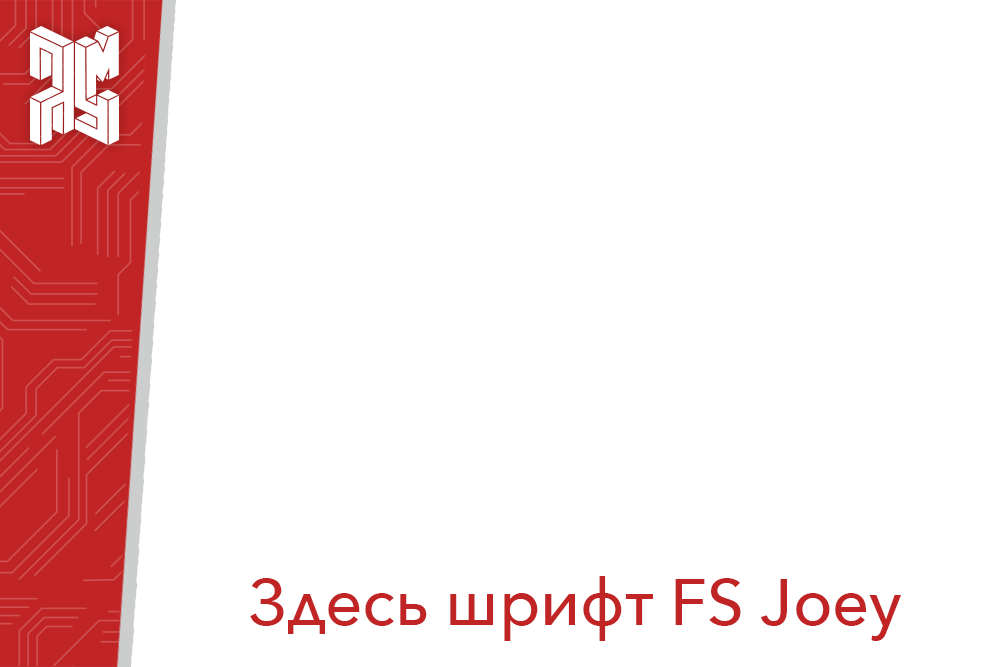
<style>
.page{position:relative;width:1000px;height:667px;background:#ffffff}
.page>*{position:absolute;margin:0}
.t1{font:65px "AvenirNext-Medium";color:#c12424}
</style>
<div class="page">
<p class="t1" style="left:250px;top:576px;width:652px;height:65px">Здесь шрифт FS Joey</p>
</div>
